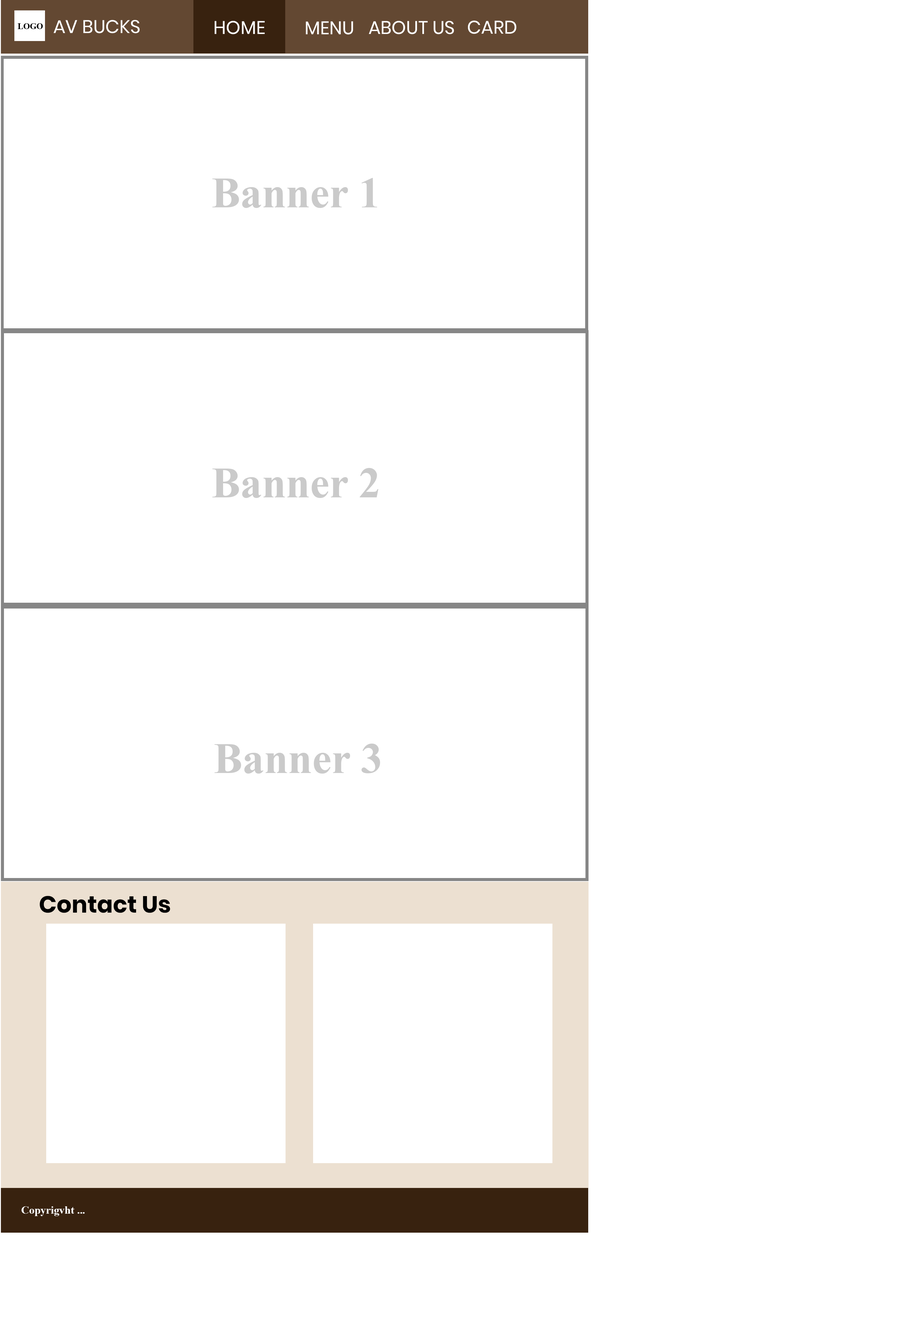
<style>
.page{position:relative;width:901px;height:1323px;background:#ffffff}
.page>*{position:absolute;margin:0}
.t1{font:8.4px "TimesNewRomanPS-BoldMT";color:#000000}
.t2{font:18.4px "Poppins-Regular";color:#ffffff}
.t3{font:18.4px "TimesNewRomanPS-BoldMT";color:#ffffff}
.t4{font:43.3px "TimesNewRomanPS-BoldMT";color:#cacaca}
.t5{font:23.4px "Poppins-Bold";color:#000000}
.t6{font:10.9px "TimesNewRomanPS-BoldMT";color:#ffffff}
</style>
<div class="page">
<p class="t1" style="left:18px;top:23px;width:25px;height:6px">LOGO</p>
<p class="t2" style="left:54px;top:20px;width:86px;height:13px">AV BUCKS</p>
<p class="t2" style="left:215px;top:21px;width:50px;height:13px">HOME</p>
<p class="t2" style="left:306px;top:21px;width:47px;height:14px"><span class="t3"><br></span>MENU</p>
<p class="t2" style="left:369px;top:21px;width:85px;height:13px">ABOUT US</p>
<p class="t2" style="left:468px;top:21px;width:49px;height:13px">CARD</p>
<p class="t4" style="left:212px;top:178px;width:166px;height:30px">Banner 1</p>
<p class="t4" style="left:212px;top:468px;width:167px;height:30px">Banner 2</p>
<p class="t4" style="left:214px;top:743px;width:166px;height:30px">Banner 3</p>
<p class="t5" style="left:40px;top:896px;width:130px;height:17px">Contact Us</p>
<p class="t6" style="left:21px;top:1206px;width:64px;height:10px">Copyrigvht ...</p>
</div>
